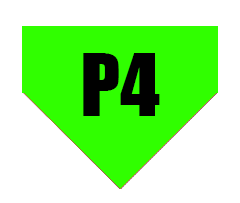
<style>
.page{position:relative;width:240px;height:203px;background:#ffffff}
.page>*{position:absolute;margin:0}
.t1{font:80px "Impact";color:#000000}
</style>
<div class="page">
<p class="t1" style="left:82px;top:52px;width:77px;height:65px">P3</p>
<p class="t1" style="left:83px;top:52px;width:76px;height:64px">P2</p>
<p class="t1" style="left:83px;top:53px;width:77px;height:63px">P4</p>
<p class="t1" style="left:88px;top:53px;width:65px;height:63px">P1</p>
</div>
